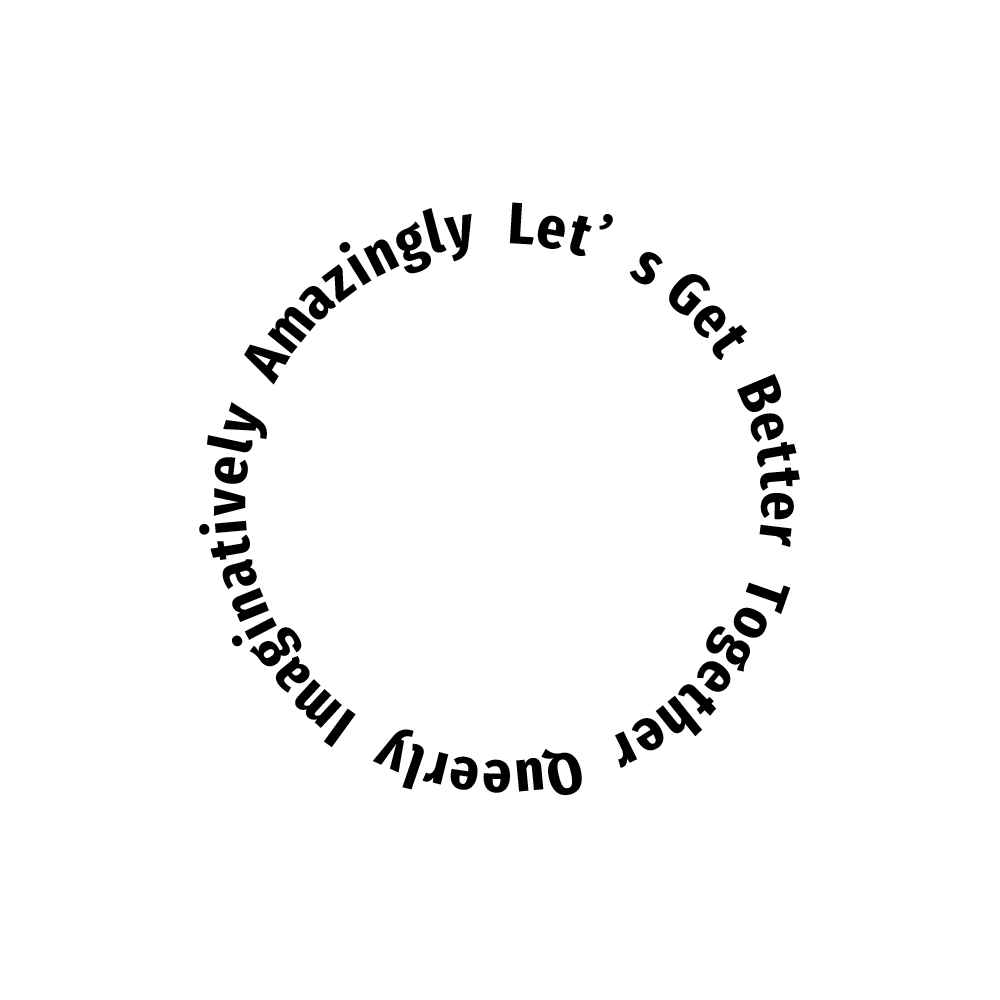
<style>
.page{position:relative;width:1000px;height:1000px;background:#ffffff}
.page>*{position:absolute;margin:0}
.t1{font:54.8px "GlowSansSC-Compressed-ExtraBold";letter-spacing:0.1em;color:#000000;scale:1.06 1}
</style>
<div class="page">
<p class="t1" style="left:199px;top:202px;width:601px;height:594px">Let’s Get  Better  Together  Queerly  Imaginatively  Amazingly</p>
</div>
